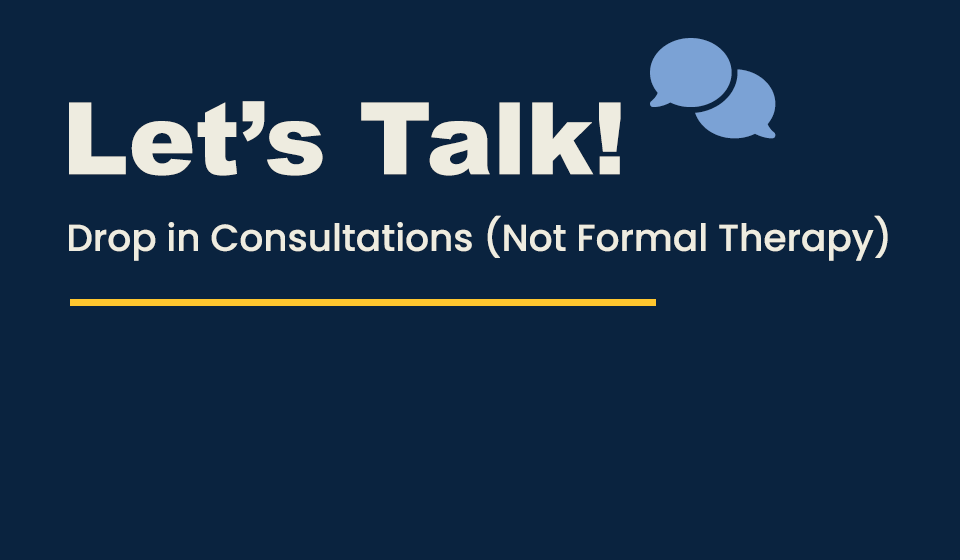
<style>
.page{position:relative;width:960px;height:560px;background:#0a233f}
.page>*{position:absolute;margin:0}
.t1{font:100px "Arial-Black";color:#eeece0}
.t2{font:37.5px "Poppins-Medium";color:#eeece0}
</style>
<div class="page">
<p class="t1" style="left:69px;top:101px;width:552px;height:75px">Let’s Talk!</p>
<p class="t2" style="left:69px;top:215px;width:819px;height:46px">Drop in Consultations (Not Formal Therapy)</p>
</div>
